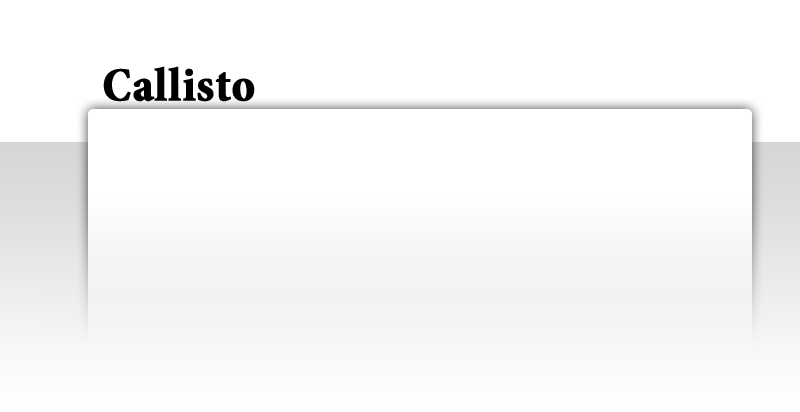
<style>
.page{position:relative;width:800px;height:412px;background:#ffffff}
.page>*{position:absolute;margin:0}
.t1{font:48px "MinionPro-BoldCn";color:#000000;font-weight:bold}
</style>
<div class="page">
<p class="t1" style="left:103px;top:66px;width:152px;height:36px">Callisto</p>
</div>
